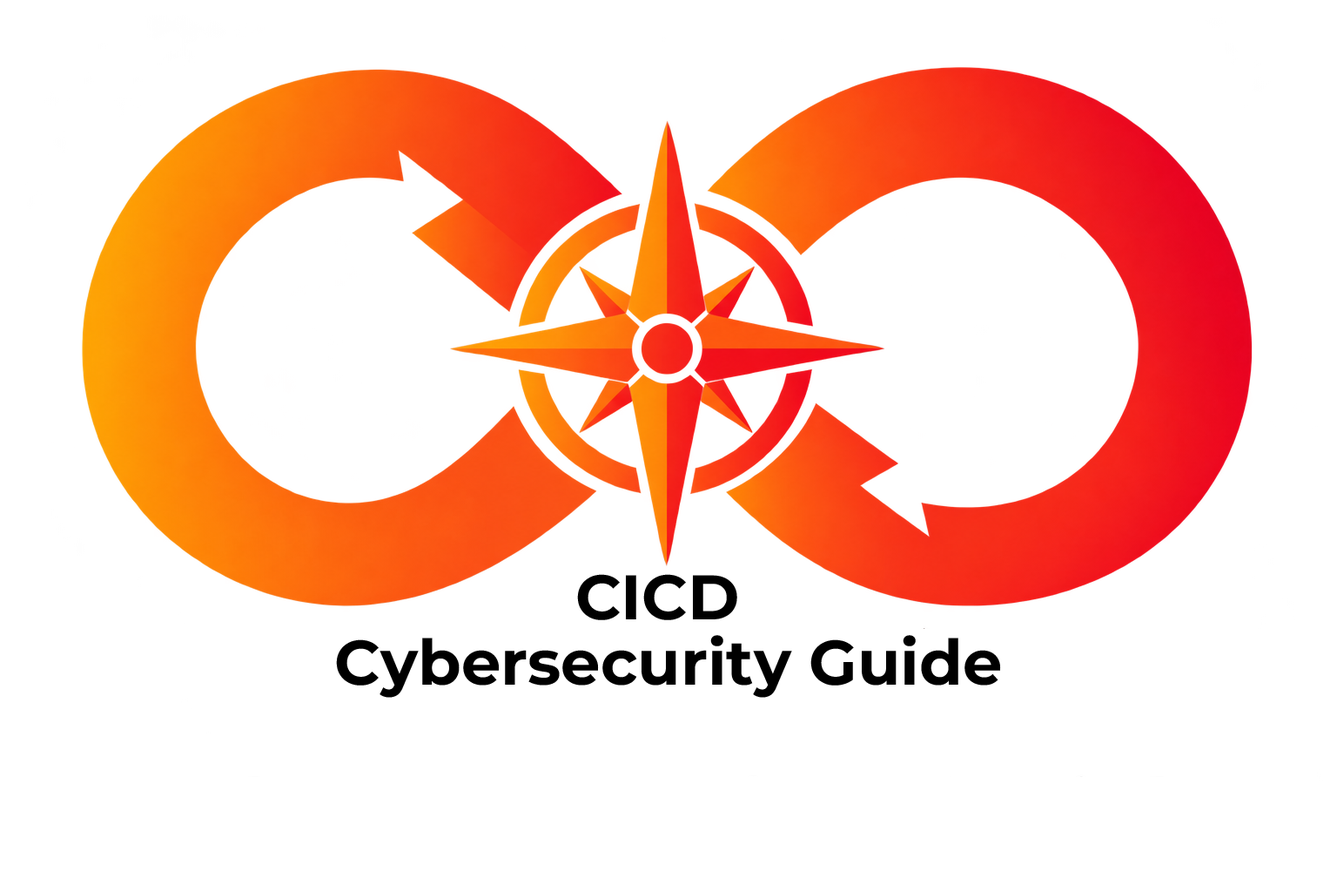
<style>
.page{position:relative;width:1337px;height:892px;background:#ffffff}
.page>*{position:absolute;margin:0}
.t1{font:62.7px "Montserrat-Bold";color:#000000}
</style>
<div class="page">
<p class="t1" style="left:577px;top:574px;width:160px;height:46px">CICD</p>
<p class="t1" style="left:336px;top:635px;width:665px;height:62px">Cybersecurity Guide</p>
</div>
